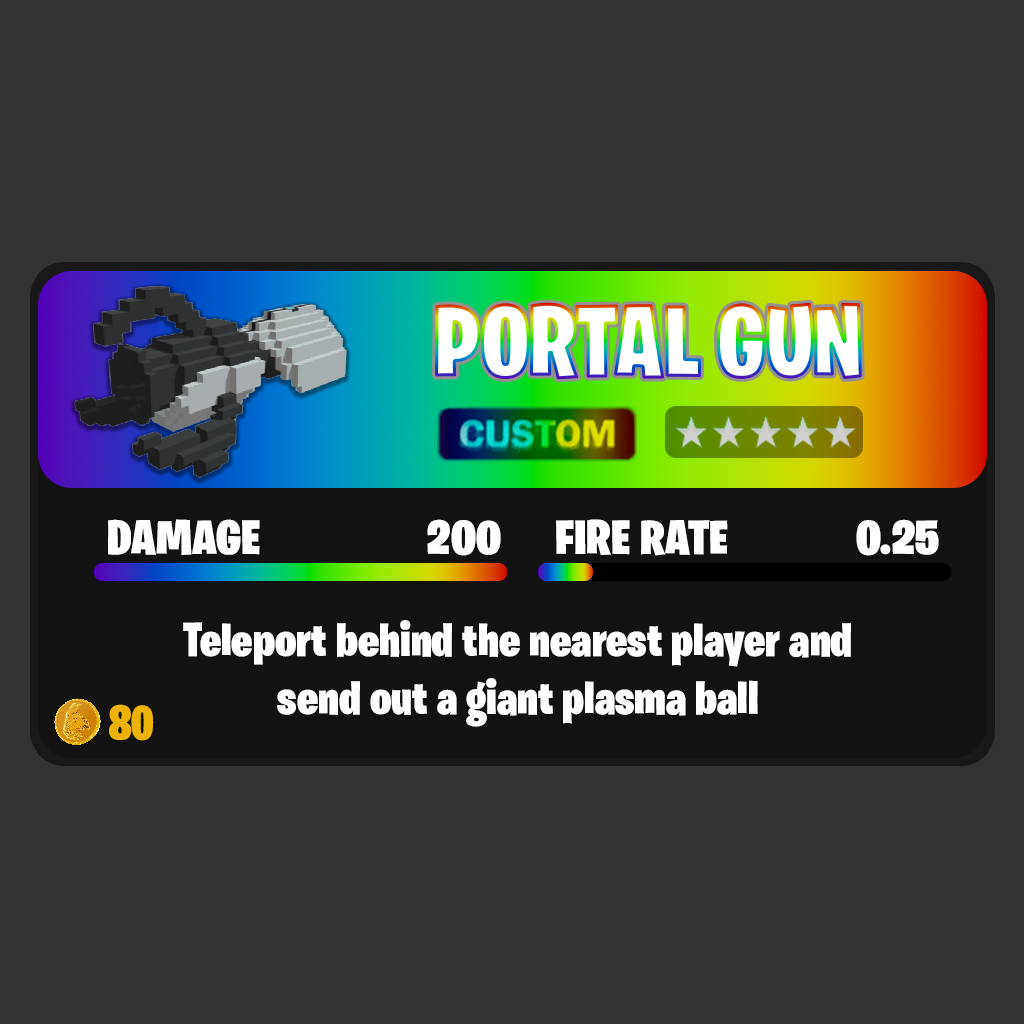
<style>
.page{position:relative;width:1024px;height:1024px;background:#333333}
.page>*{position:absolute;margin:0}
.t1{font:100.8px "BurbankBigCondensed-Black";color:#ffffff}
.t2{font:48.4px "BurbankBigCondensed-Black";color:#ffffff;scale:1.1 1}
.t3{font:48.3px "BurbankBigCondensed-Black";color:#ffffff;scale:1.1 1}
.t4{font:48px "BurbankBigCondensed-Black";color:#ffffff}
.t5{font:48px "BurbankBigCondensed-Black";color:#ecb304}
</style>
<div class="page">
<p class="t1" style="left:436px;top:303px;width:425px;height:76px">PORTAL GUN</p>
<p class="t2" style="left:108px;top:519px;width:152px;height:36px">DAMAGE</p>
<p class="t2" style="left:427px;top:519px;width:74px;height:37px">200</p>
<p class="t3" style="left:556px;top:519px;width:172px;height:37px">FIRE RATE</p>
<p class="t3" style="left:856px;top:519px;width:83px;height:37px">0.25</p>
<p class="t4" style="left:183px;top:620px;width:668px;height:107px;text-align:center">Teleport behind the nearest player and <br>send out a giant plasma ball</p>
<p class="t5" style="left:109px;top:704px;width:45px;height:37px">80</p>
</div>
